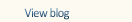
<style>
.page{position:relative;width:132px;height:22px;background:#fdfaf2}
.page>*{position:absolute;margin:0}
.t1{font:13px "Calibri";letter-spacing:-0.04em;scale:0.94 1}
</style>
<div class="page">
<p class="t1" style="left:24px;top:8px;width:46px;height:12px">View blog</p>
</div>
